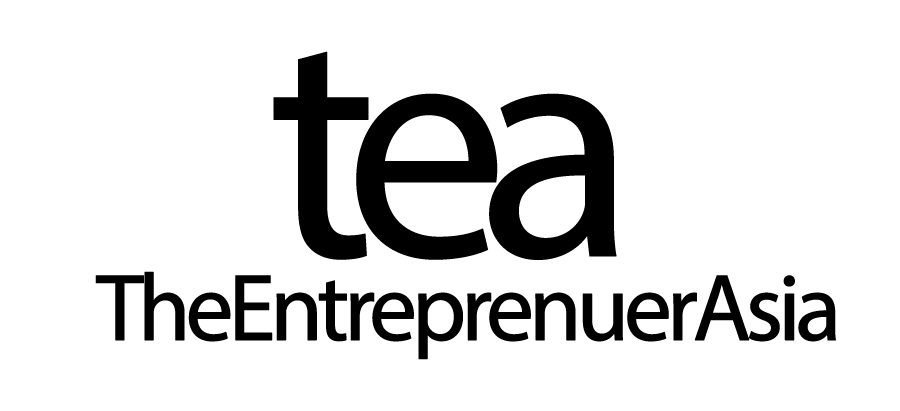
<style>
.page{position:relative;width:900px;height:411px;background:#ffffff}
.page>*{position:absolute;margin:0}
.t1{font:327.5px "MyriadPro-Regular";letter-spacing:-0.12em;color:#000000;font-weight:bold}
.t2{font:95.2px "MyriadPro-Regular";letter-spacing:-0.08em;color:#000000;font-weight:bold}
</style>
<div class="page">
<p class="t1" style="left:273px;top:51px;width:344px;height:209px">tea</p>
<p class="t2" style="left:95px;top:271px;width:741px;height:89px">TheEntreprenuerAsia</p>
</div>
